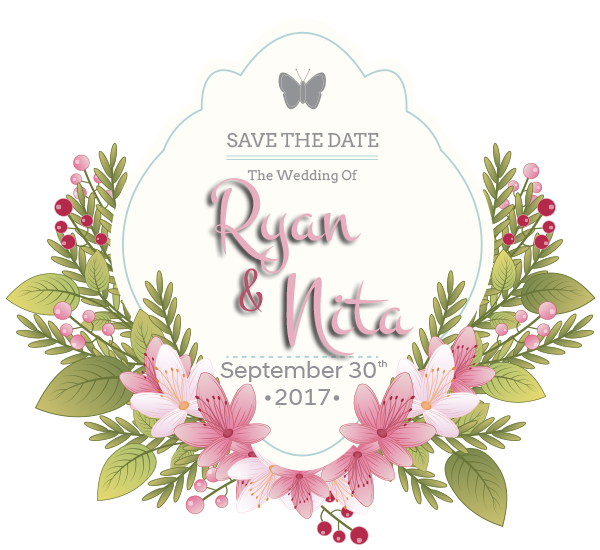
<style>
.page{position:relative;width:600px;height:550px;background:#ffffff}
.page>*{position:absolute;margin:0}
.t1{font:90px "Montez-Regular";color:#e8adbe}
.t2{font:60px "Montez-Regular";color:#b8506a}
.t3{font:24px "HyundaiSansHeadOffice-Regular";color:#929396}
.t4{font:10px "HyundaiSansHeadOffice-Regular";color:#929396}
</style>
<div class="page">
<p class="t1" style="left:211px;top:178px;width:151px;height:96px">Ryan</p>
<p class="t2" style="left:239px;top:268px;width:24px;height:45px">&amp;</p>
<p class="t1" style="left:286px;top:273px;width:128px;height:83px">Nita</p>
<p class="t3" style="left:220px;top:361px;width:156px;height:21px">September 30</p>
<p class="t4" style="left:378px;top:360px;width:9px;height:7px">th</p>
<p class="t3" style="left:275px;top:389px;width:55px;height:16px">2017</p>
</div>
